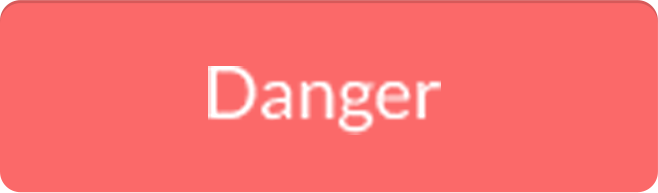
<style>
.page{position:relative;width:658px;height:193px;background:#fb6969}
.page>*{position:absolute;margin:0}
.t1{font:73.6px "Lato-Regular";color:#ffffff}
</style>
<div class="page">
<p class="t1" style="left:208px;top:66px;width:233px;height:69px">Danger</p>
</div>
